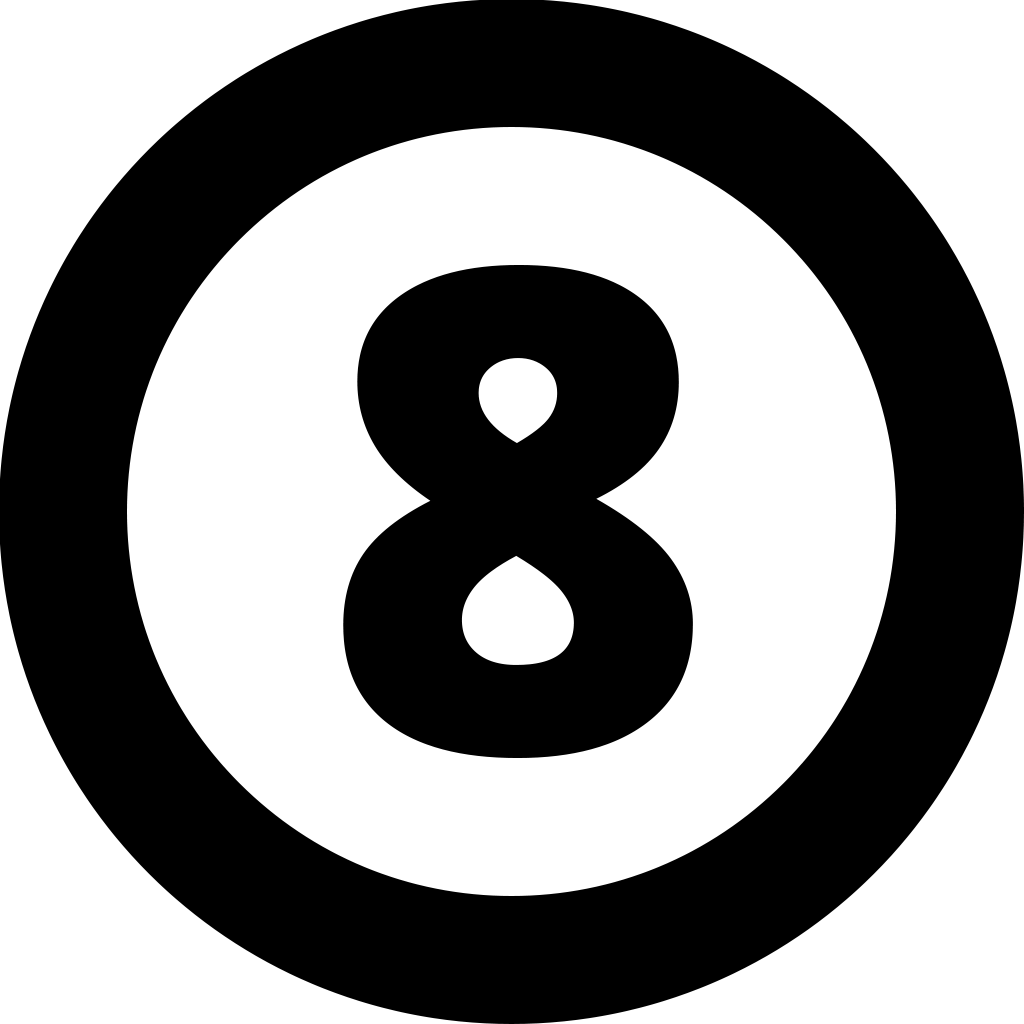
<style>
.page{position:relative;width:1024px;height:1024px;background:#ffffff}
.page>*{position:absolute;margin:0}
.t1{font:670.8px "OpenSans-Extrabold";color:#000000}
</style>
<div class="page">
<p class="t1" style="left:343px;top:265px;width:350px;height:493px">8</p>
</div>
